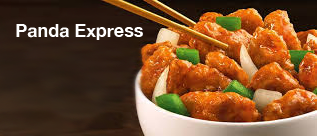
<style>
.page{position:relative;width:317px;height:136px}
.page>*{position:absolute;margin:0}
.t1{font:18px "HelveticaNeue-Bold";color:#ffffff}
</style>
<div class="page">
<p class="t1" style="left:16px;top:24px;width:127px;height:16px">Panda Express</p>
</div>
